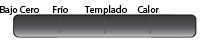
<style>
.page{position:relative;width:200px;height:52px;background:#ffffff}
.page>*{position:absolute;margin:0}
.t1{font:10px "MyriadPro-Regular";color:#000000}
</style>
<div class="page">
<p class="t1" style="left:0px;top:6px;width:39px;height:9px">Bajo Cero</p>
<p class="t1" style="left:53px;top:6px;width:15px;height:7px">Frío</p>
<p class="t1" style="left:84px;top:5px;width:43px;height:10px">Templado</p>
<p class="t1" style="left:137px;top:5px;width:22px;height:8px">Calor</p>
</div>
